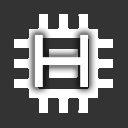
<style>
.page{position:relative;width:128px;height:128px;background:#333333}
.page>*{position:absolute;margin:0}
.t1{font:72px "Orbitron-Medium";color:#ffffff}
</style>
<div class="page">
<p class="t1" style="left:35px;top:35px;width:53px;height:52px">H</p>
</div>
